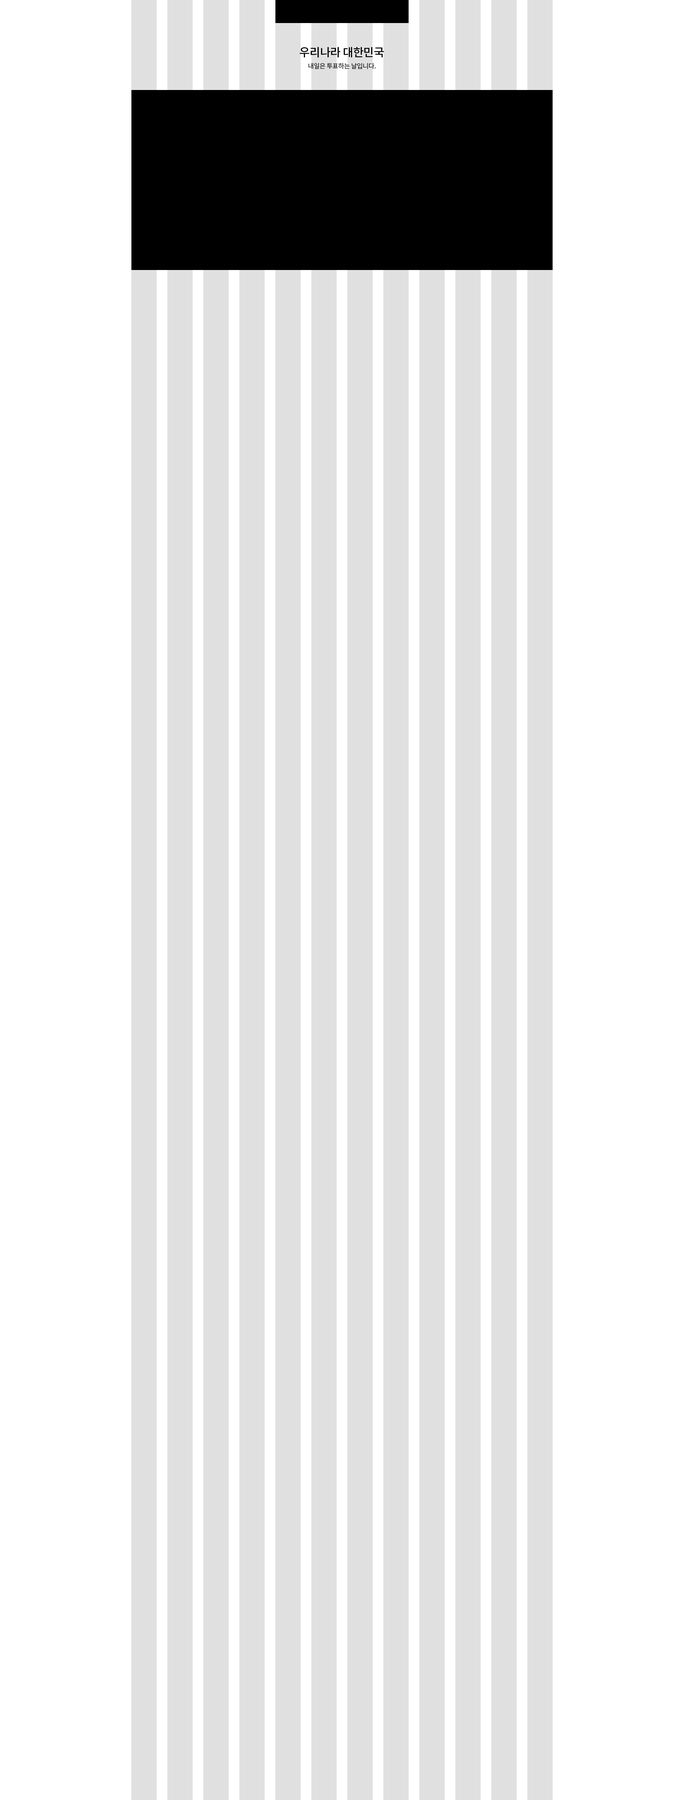
<style>
.page{position:relative;width:684px;height:1800px;background:#ffffff}
.page>*{position:absolute;margin:0}
.t1{font:11.5px "NotoSansKR-Medium";letter-spacing:-0.025em;color:#000000}
.t2{font:6.5px "NotoSansKR-Regular";letter-spacing:-0.025em;color:#000000}
</style>
<div class="page">
<p class="t1" style="left:300px;top:47px;width:84px;height:11px">우리나라 대한민국</p>
<p class="t2" style="left:309px;top:63px;width:67px;height:6px">내일은 투표하는 날입니다.</p>
</div>
